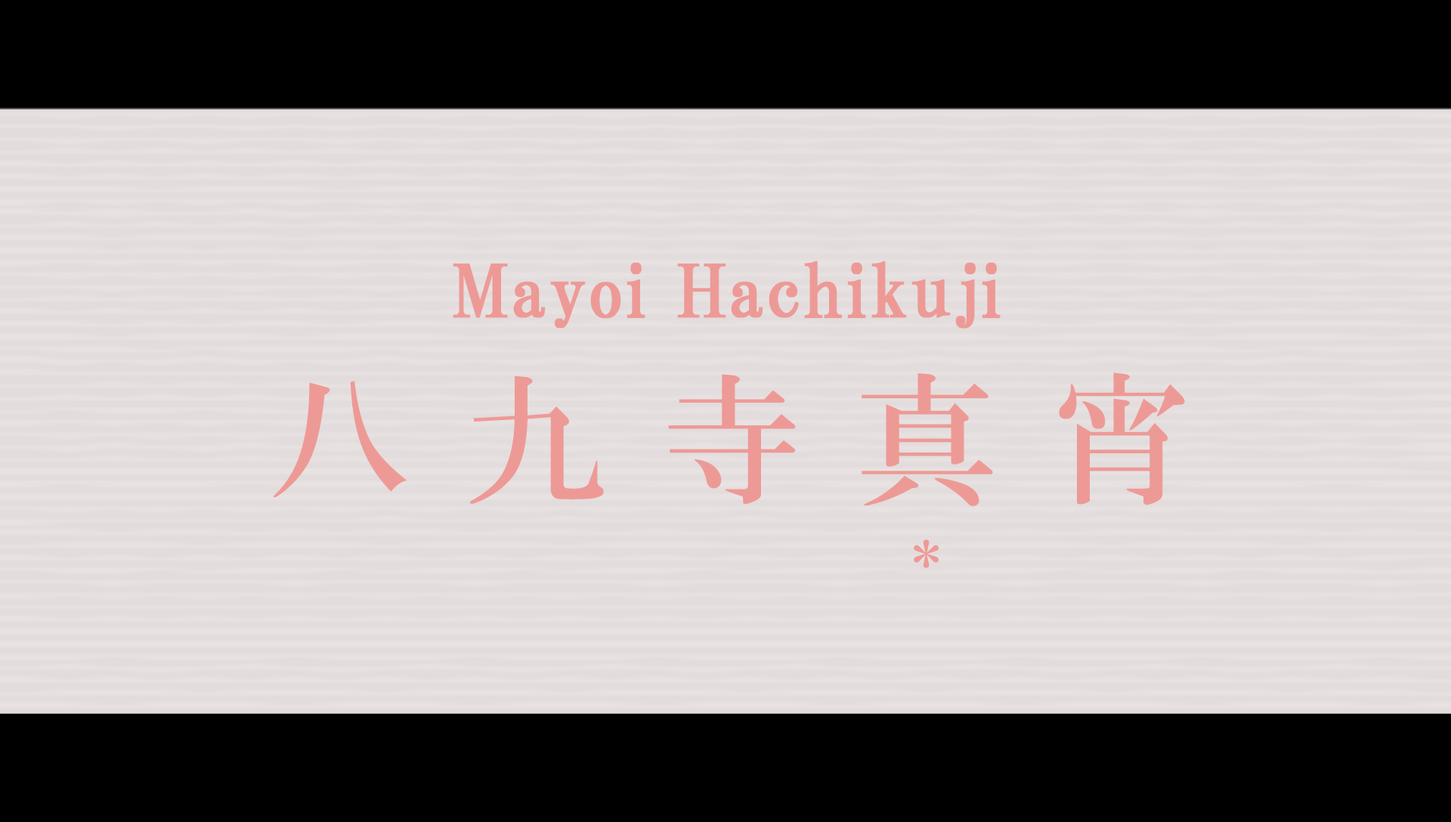
<style>
.page{position:relative;width:1451px;height:822px;background:#e3dcdc}
.page>*{position:absolute;margin:0}
.t1{font:72.5px "HGPMinchoB";letter-spacing:0.01em;color:#ed9a97;font-weight:bold}
.t2{font:142px "HGMinchoB";letter-spacing:0.37em;color:#ed9a97}
.t3{font:55.2px "HGMinchoB";letter-spacing:0.37em;color:#ed9a97}
</style>
<div class="page">
<p class="t1" style="left:453px;top:261px;width:547px;height:68px">Mayoi Hachikuji</p>
<p class="t2" style="left:273px;top:372px;width:912px;height:134px">八九寺真宵</p>
<p class="t3" style="left:913px;top:539px;width:25px;height:29px">*</p>
</div>
